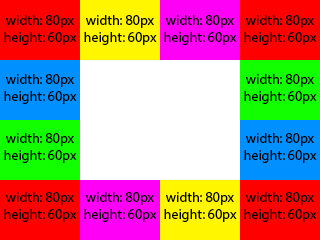
<style>
.page{position:relative;width:320px;height:240px;background:#ffffff}
.page>*{position:absolute;margin:0}
.t1{font:14px "MyriadPro-Regular";color:#000000}
</style>
<div class="page">
<p class="t1" style="left:4px;top:15px;width:73px;height:30px;text-align:center">width: 80px<br>height: 60px</p>
<p class="t1" style="left:84px;top:15px;width:73px;height:30px;text-align:center">width: 80px<br>height: 60px</p>
<p class="t1" style="left:164px;top:15px;width:73px;height:30px;text-align:center">width: 80px<br>height: 60px</p>
<p class="t1" style="left:244px;top:15px;width:73px;height:30px;text-align:center">width: 80px<br>height: 60px</p>
<p class="t1" style="left:4px;top:74px;width:73px;height:30px;text-align:center">width: 80px<br>height: 60px</p>
<p class="t1" style="left:244px;top:74px;width:73px;height:30px;text-align:center">width: 80px<br>height: 60px</p>
<p class="t1" style="left:4px;top:133px;width:73px;height:30px;text-align:center">width: 80px<br>height: 60px</p>
<p class="t1" style="left:244px;top:133px;width:73px;height:30px;text-align:center">width: 80px<br>height: 60px</p>
<p class="t1" style="left:4px;top:192px;width:73px;height:30px;text-align:center">width: 80px<br>height: 60px</p>
<p class="t1" style="left:84px;top:192px;width:73px;height:30px;text-align:center">width: 80px<br>height: 60px</p>
<p class="t1" style="left:164px;top:192px;width:73px;height:30px;text-align:center">width: 80px<br>height: 60px</p>
<p class="t1" style="left:244px;top:192px;width:73px;height:30px;text-align:center">width: 80px<br>height: 60px</p>
</div>
